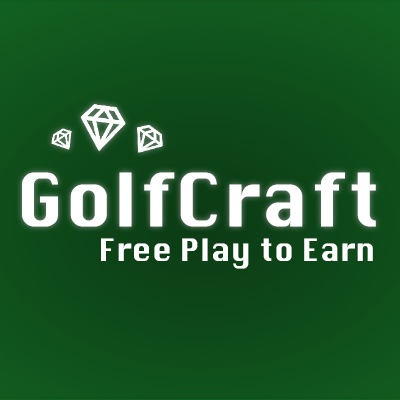
<style>
.page{position:relative;width:400px;height:400px}
.page>*{position:absolute;margin:0}
.t1{font:72px "Krungthep";letter-spacing:0.01em;color:#ffffff}
.t2{font:30px "Krungthep";letter-spacing:0.01em;color:#ffffff}
</style>
<div class="page">
<p class="t1" style="left:22px;top:172px;width:354px;height:55px">GolfCraft</p>
<p class="t2" style="left:101px;top:238px;width:272px;height:31px">Free Play to Earn</p>
</div>
